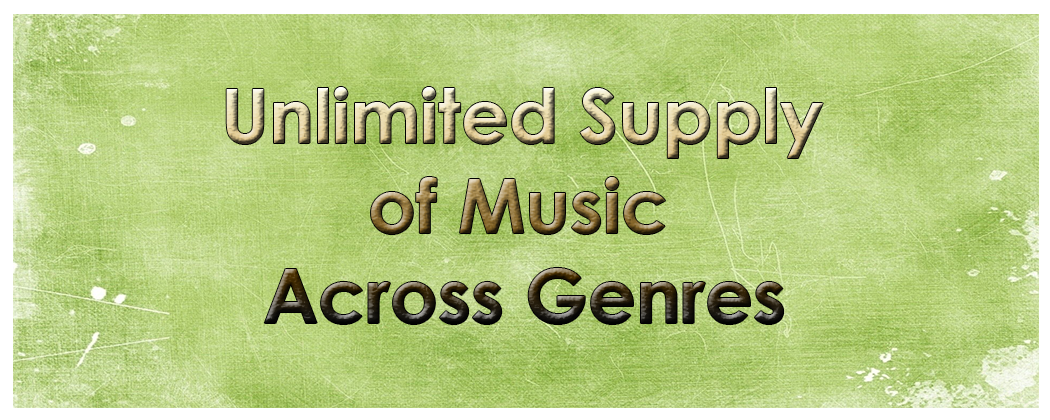
<style>
.page{position:relative;width:1050px;height:420px}
.page>*{position:absolute;margin:0}
.t1{font:75px "CenturyGothic-Bold"}
</style>
<div class="page">
<p class="t1" style="left:226px;top:87px;width:597px;height:237px">Unlimited Supply <br>       of Music<br>  Across Genres</p>
</div>
